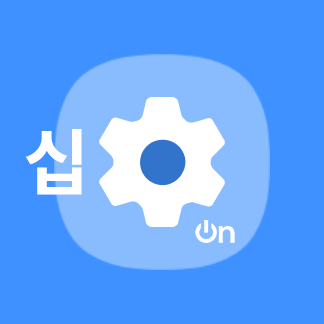
<style>
.page{position:relative;width:324px;height:324px;background:#3e91ff}
.page>*{position:absolute;margin:0}
.t1{font:72px "NotoSansKR-Bold";letter-spacing:0.005em;color:#ffffff}
</style>
<div class="page">
<p class="t1" style="left:25px;top:129px;width:57px;height:66px">십</p>
</div>
